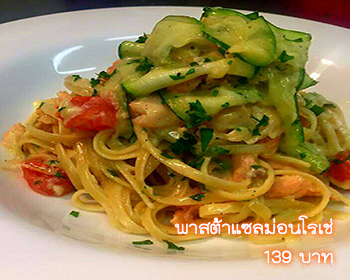
<style>
.page{position:relative;width:350px;height:280px}
.page>*{position:absolute;margin:0}
.t1{font:24px "THKodchasal";color:#ffffff}
</style>
<div class="page">
<p class="t1" style="left:174px;top:215px;width:159px;height:49px">พาสต้าแซลม่อนโรเช่<br>บาท 139</p>
</div>
